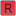
<style>
.page{position:relative;width:16px;height:16px;background:#a0a0a0}
.page>*{position:absolute;margin:0}
.t1{font:13px "ArialNarrow";color:#4b1519}
</style>
<div class="page">
<p class="t1" style="left:5px;top:3px;width:7px;height:10px">R</p>
</div>
